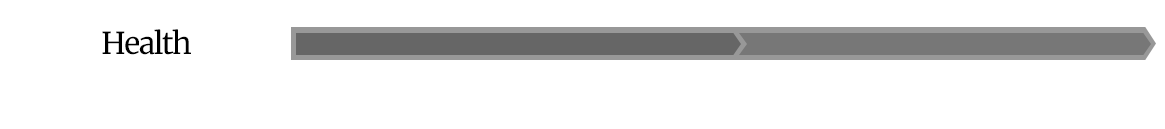
<style>
.page{position:relative;width:1165px;height:129px;background:#ffffff}
.page>*{position:absolute;margin:0}
.t1{font:30px "Merriweather-Regular";letter-spacing:-0.06em;color:#000000}
</style>
<div class="page">
<p class="t1" style="left:102px;top:29px;width:89px;height:26px">Health</p>
</div>
